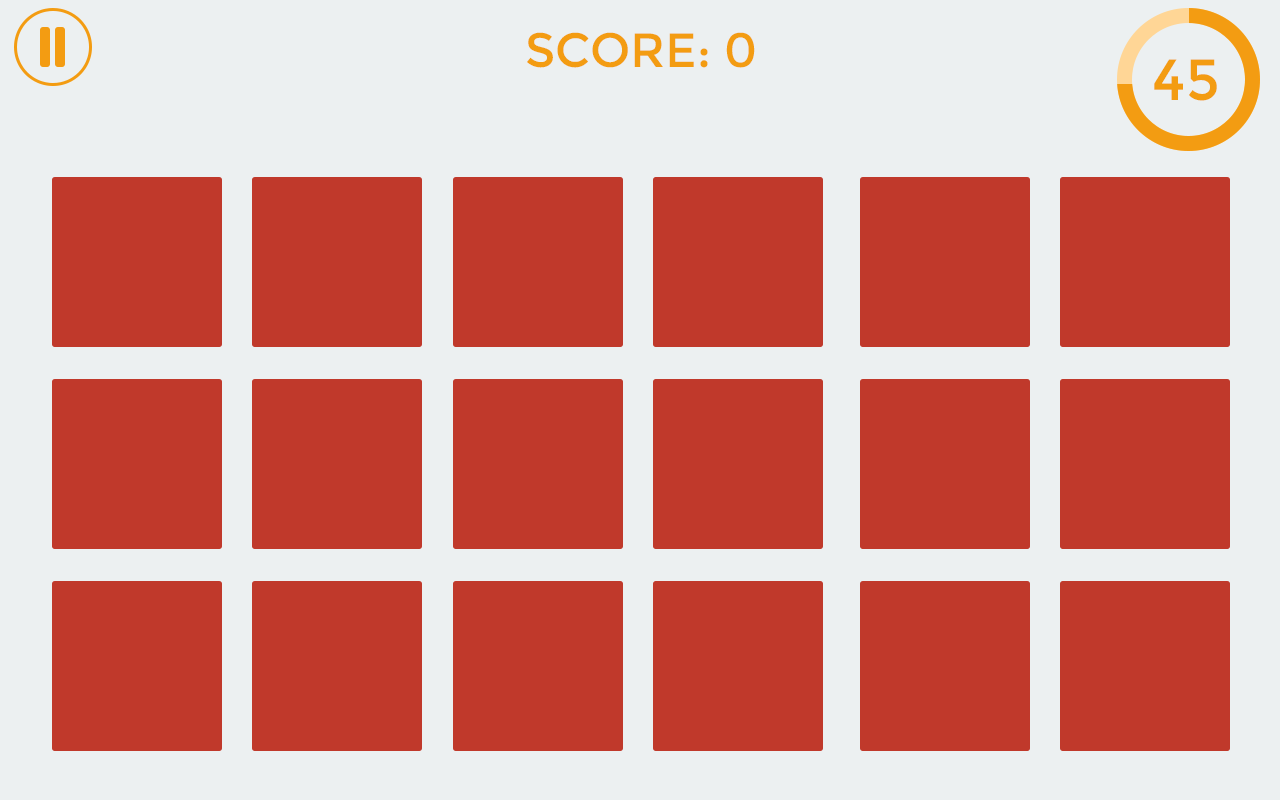
<style>
.page{position:relative;width:1280px;height:800px;background:#ecf0f1}
.page>*{position:absolute;margin:0}
.t1{font:48px "Montserrat-Regular";color:#f39c12}
.t2{font:58px "Montserrat-Regular";color:#f39c12}
</style>
<div class="page">
<p class="t1" style="left:527px;top:32px;width:228px;height:36px">SCORE: 0</p>
<p class="t2" style="left:1154px;top:59px;width:63px;height:42px">45</p>
</div>
